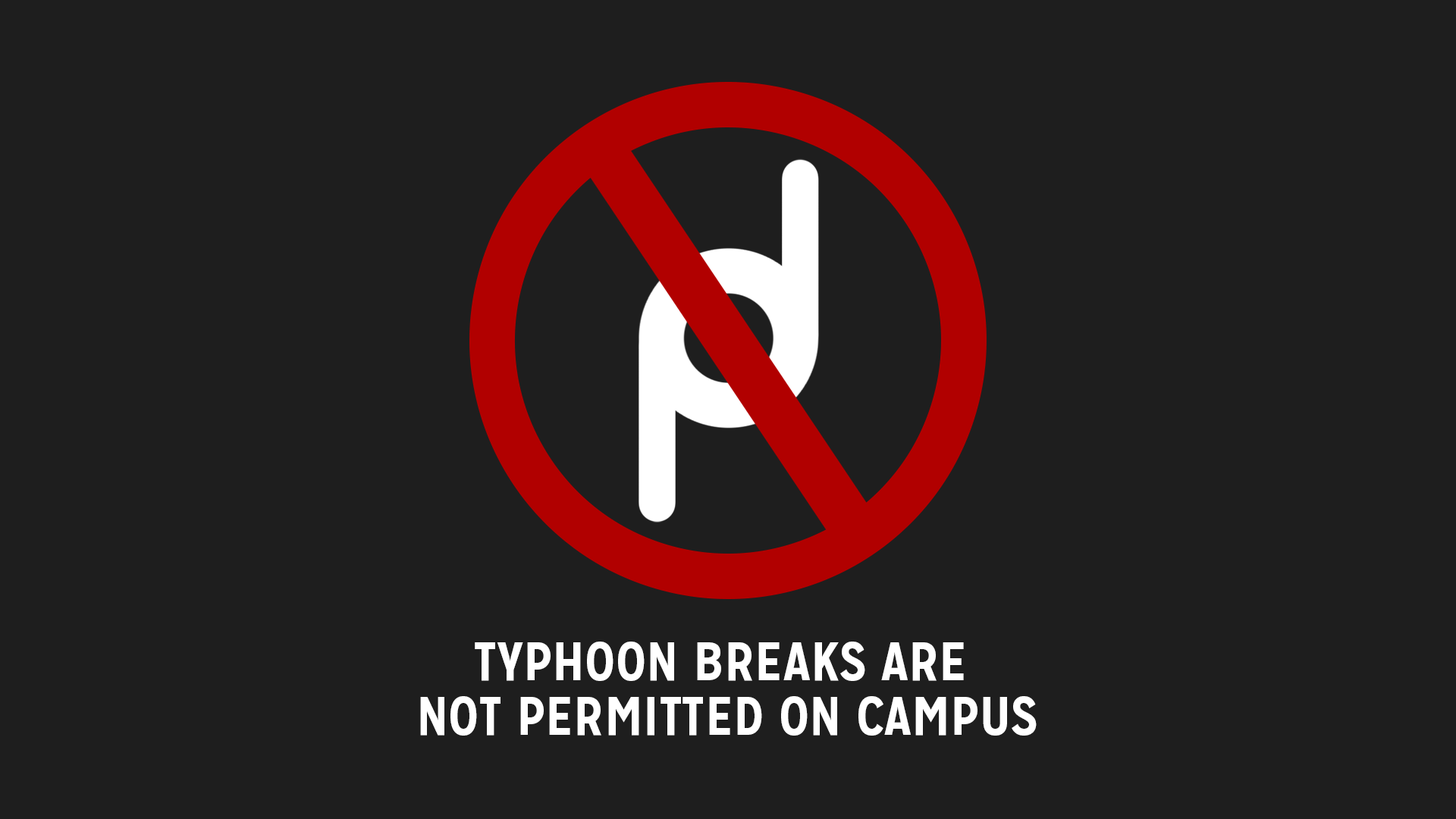
<style>
.page{position:relative;width:1456px;height:819px;background:#1e1e1e}
.page>*{position:absolute;margin:0}
.t1{font:54.6px/54.6px "MissionGothic-Bold";color:#ffffff}
</style>
<div class="page">
<p class="t1" style="left:420px;top:642px;width:617px;height:94px;text-align:center">TYPHOON BREAKS ARE <br>NOT PERMITTED ON CAMPUS</p>
</div>
